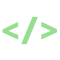
<style>
.page{position:relative;width:60px;height:60px;background:#ffffff}
.page>*{position:absolute;margin:0}
.t1{font:30px "MicrosoftYaHei-Bold";color:#98de91;font-weight:bold}
</style>
<div class="page">
<p class="t1" style="left:2px;top:16px;width:55px;height:29px">&lt;/&gt;</p>
</div>
